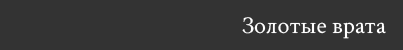
<style>
.page{position:relative;width:403px;height:50px;background:#333333}
.page>*{position:absolute;margin:0}
.t1{font:24px "CrimsonText-Regular";color:#ffffff}
</style>
<div class="page">
<p class="t1" style="left:242px;top:17px;width:144px;height:22px">Золотые врата</p>
</div>
